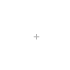
<style>
.page{position:relative;width:70px;height:70px;background:#ffffff}
.page>*{position:absolute;margin:0}
.t1{font:12.8px "Montserrat-Regular";letter-spacing:0.04em;color:#b4b4b4;text-transform:uppercase}
</style>
<div class="page">
<p class="t1" style="left:33px;top:34px;width:7px;height:6px">+</p>
</div>
